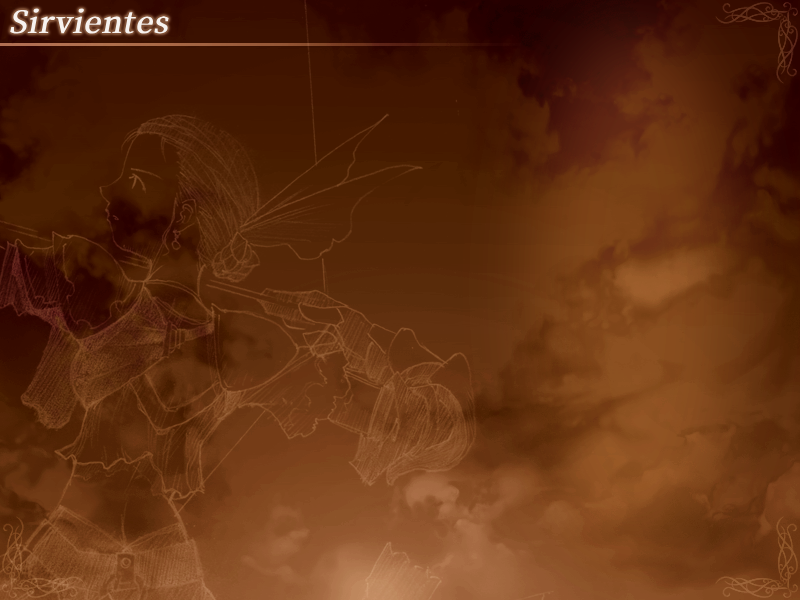
<style>
.page{position:relative;width:800px;height:600px}
.page>*{position:absolute;margin:0}
.t1{font:37px "OfficialFateFont-Medium";color:#f7f2ef;font-weight:bold;font-style:italic}
</style>
<div class="page">
<p class="t1" style="left:10px;top:8px;width:159px;height:26px">Sirvientes</p>
</div>
